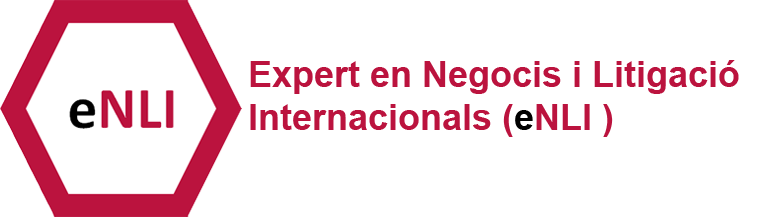
<style>
.page{position:relative;width:760px;height:217px;background:#ffffff}
.page>*{position:absolute;margin:0}
.t1{font:36px "Arial-BoldMT";color:#bb133e}
.t2{font:36px "Arial-BoldMT";color:#000000}
</style>
<div class="page">
<p class="t1" style="left:250px;top:60px;width:489px;height:77px">Expert en Negocis i Litigació<br>Internacionals (<span class="t2">e</span>NLI )</p>
</div>
